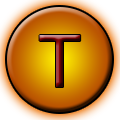
<style>
.page{position:relative;width:120px;height:120px}
.page>*{position:absolute;margin:0}
.t1{font:72px "TrebuchetMS"}
</style>
<div class="page">
<p class="t1" style="left:39px;top:35px;width:42px;height:52px">T</p>
</div>
